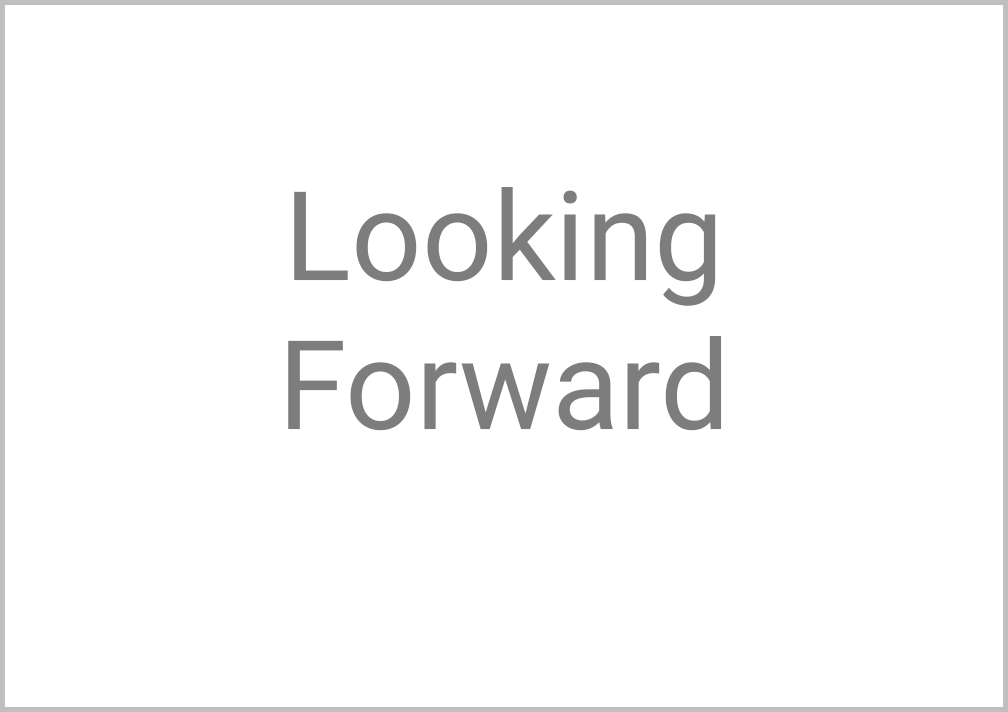
<style>
.page{position:relative;width:1008px;height:712px;background:#ffffff}
.page>*{position:absolute;margin:0}
.t1{font:124px "Roboto-Regular";color:#7d7d7d}
</style>
<div class="page">
<p class="t1" style="left:288px;top:187px;width:434px;height:244px;text-align:center">Looking <br>Forward</p>
</div>
